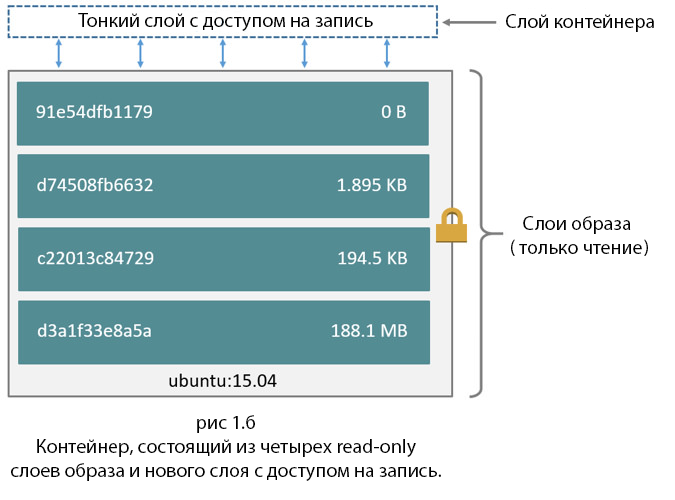
<style>
.page{position:relative;width:675px;height:500px;background:#ffffff}
.page>*{position:absolute;margin:0}
.t1{font:12px "MyriadPro-Regular";color:#000000}
</style>
<div class="page">
<p class="t1" style="left:78px;top:13px;width:295px;height:18px">Тонкий слой с доступом на запись</p>
<p class="t1" style="left:506px;top:14px;width:148px;height:18px">Слой контейнера</p>
<p class="t1" style="left:511px;top:216px;width:137px;height:40px;text-align:center">Слои образа <br>( только чтение )</p>
<p class="t1" style="left:11px;top:415px;width:430px;height:66px;text-align:center">рис 1.б<br>Контейнер, состоящий из четырех read-only<br>слоев образа и нового слоя с доступом на запись.</p>
</div>
